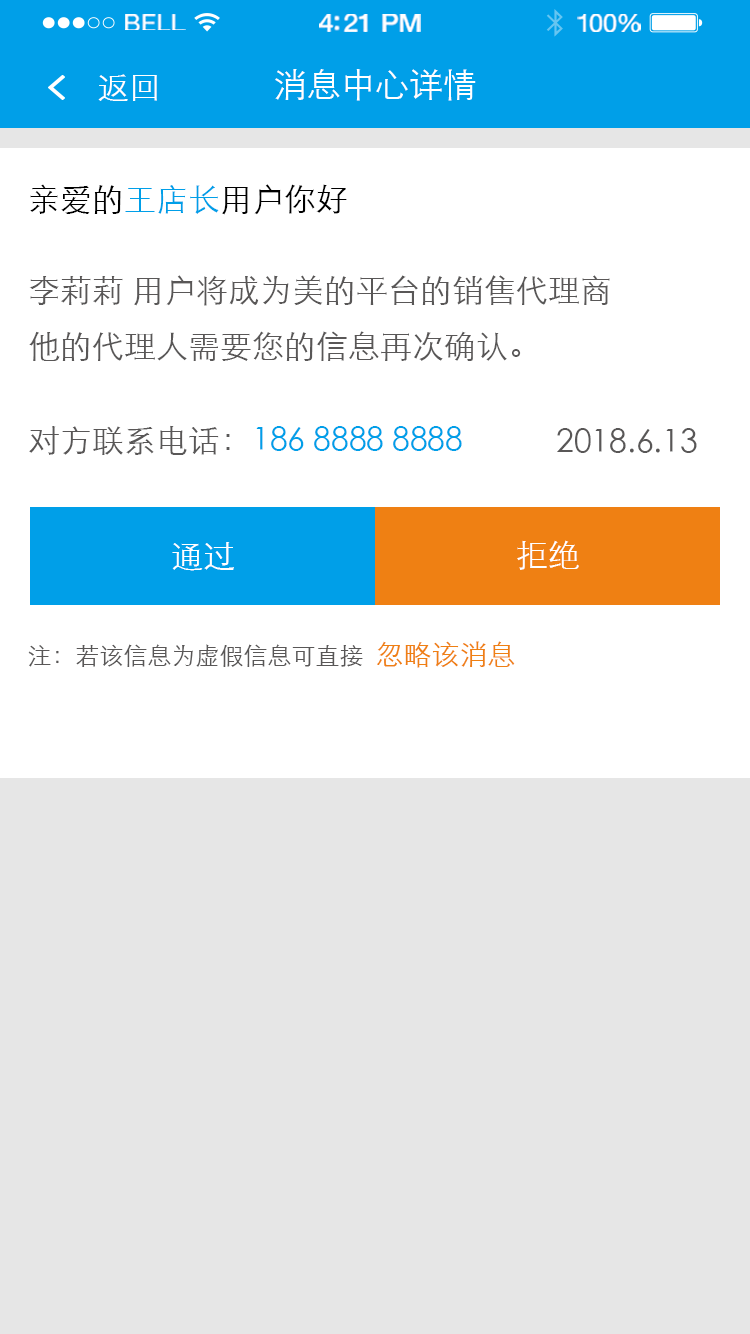
<style>
.page{position:relative;width:750px;height:1334px;background:#e6e6e6}
.page>*{position:absolute;margin:0}
.t1{font:23.3px "HelveticaNeue";letter-spacing:0.02em;color:#ffffff;scale:1.06 1}
.t2{font:25.3px "HelveticaNeue-Medium";letter-spacing:-0.02em;color:#ffffff;scale:1.06 1}
.t3{font:24.3px "HelveticaNeue";letter-spacing:-0.02em;color:#ffffff;scale:1.06 1}
.t4{font:32px "STXihei";color:#ffffff}
.t5{font:34px "STXihei";color:#ffffff}
.t6{font:32px "STXihei";color:#000000}
.t7{font:32px "STXihei";color:#009fe8}
.t8{font:32px/56px "STXihei";color:#595757}
.t9{font:32px "STXihei";color:#595757}
.t10{font:24px "STXihei";color:#595757}
.t11{font:28px "STXihei";color:#ef8013}
</style>
<div class="page">
<p class="t1" style="left:125px;top:14px;width:61px;height:16px">BELL</p>
<p class="t2" style="left:319px;top:14px;width:102px;height:18px">4:21 PM</p>
<p class="t3" style="left:577px;top:14px;width:64px;height:18px">100%</p>
<p class="t4" style="left:98px;top:74px;width:59px;height:27px">返回</p>
<p class="t5" style="left:275px;top:69px;width:201px;height:32px">消息中心详情</p>
<p class="t6" style="left:30px;top:184px;width:317px;height:31px">亲爱的<span class="t7">王店长</span>用户你好</p>
<p class="t8" style="left:29px;top:275px;width:581px;height:86px">李莉莉 用户将成为美的平台的销售代理商<br>他的代理人需要您的信息再次确认。</p>
<p class="t7" style="left:29px;top:425px;width:433px;height:30px"><span class="t9">对方联系电话：</span>186 8888 8888</p>
<p class="t9" style="left:557px;top:428px;width:140px;height:25px">2018.6.13</p>
<p class="t4" style="left:172px;top:542px;width:62px;height:29px">通过</p>
<p class="t4" style="left:517px;top:540px;width:62px;height:30px">拒绝</p>
<p class="t10" style="left:28px;top:641px;width:487px;height:27px">注：若该信息为虚假信息可直接  <span class="t11">忽略该消息</span></p>
</div>
